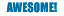
<style>
.page{position:relative;width:64px;height:16px;background:#ffffff}
.page>*{position:absolute;margin:0}
.t1{font:12px "Impact";color:#006fa8}
</style>
<div class="page">
<p class="t1" style="left:6px;top:2px;width:51px;height:11px">AWESOME!</p>
</div>
